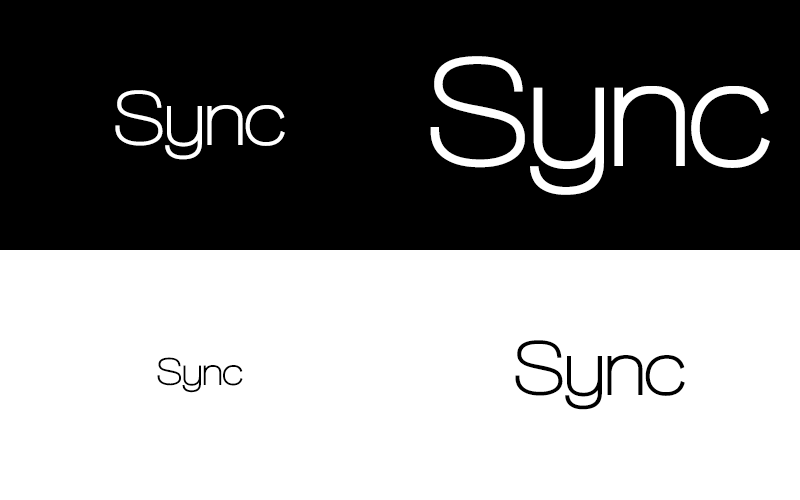
<style>
.page{position:relative;width:800px;height:500px;background:#ffffff}
.page>*{position:absolute;margin:0}
.t1{font:160px "WalkwayBold";letter-spacing:-0.02em;color:#ffffff}
.t2{font:80px "WalkwayBold";letter-spacing:-0.02em;color:#ffffff}
.t3{font:80px "WalkwayBold";letter-spacing:-0.02em;color:#000000}
.t4{font:40px "WalkwayBold";letter-spacing:-0.02em;color:#000000}
</style>
<div class="page">
<p class="t1" style="left:430px;top:56px;width:340px;height:139px">Sync</p>
<p class="t2" style="left:115px;top:90px;width:170px;height:70px">Sync</p>
<p class="t3" style="left:515px;top:340px;width:170px;height:70px">Sync</p>
<p class="t4" style="left:157px;top:357px;width:86px;height:36px">Sync</p>
</div>
